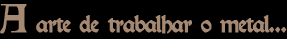
<style>
.page{position:relative;width:287px;height:39px;background:#000000}
.page>*{position:absolute;margin:0}
.t1{font:21.5px "Kelmscott-Regular";letter-spacing:-0.075em;color:#a68973;font-weight:bold}
.t2{font:36px "Kelmscott-Regular";letter-spacing:-0.075em;color:#a68973;font-weight:bold}
</style>
<div class="page">
<p class="t1" style="left:0px;top:4px;width:287px;height:30px"><span class="t2">A</span> arte de trabalhar o metal...</p>
</div>
